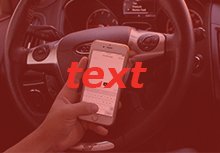
<style>
.page{position:relative;width:220px;height:153px}
.page>*{position:absolute;margin:0}
.t1{font:36px "Verdana-BoldItalic";color:#ed3028}
</style>
<div class="page">
<p class="t1" style="left:67px;top:62px;width:80px;height:26px">text</p>
</div>
